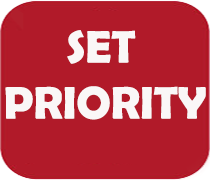
<style>
.page{position:relative;width:210px;height:180px;background:#b11a29}
.page>*{position:absolute;margin:0}
.t1{font:45.8px "BerlinSansFBDemi-Bold";color:#faf7f7}
</style>
<div class="page">
<p class="t1" style="left:67px;top:30px;width:69px;height:34px">SET</p>
<p class="t1" style="left:5px;top:86px;width:201px;height:34px">PRIORITY</p>
</div>
